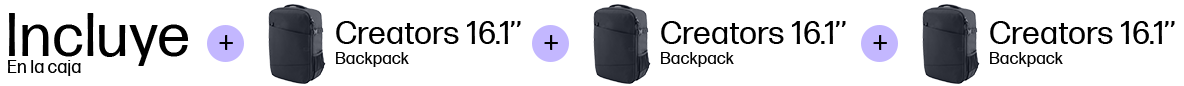
<style>
.page{position:relative;width:1184px;height:86px;background:#ffffff}
.page>*{position:absolute;margin:0}
.t1{font:60px "FormaDJRMicro-Regular";color:#000000}
.t2{font:32px "FormaDJRMicro-Regular";color:#000000}
.t3{font:30px "FormaDJRMicro-Regular";color:#000000}
.t4{font:17px "FormaDJRMicro-Regular";color:#000000}
.t5{font:18px "FormaDJRMicro-Regular";color:#000000}
</style>
<div class="page">
<p class="t1" style="left:9px;top:13px;width:180px;height:53px">Incluye</p>
<p class="t2" style="left:336px;top:21px;width:185px;height:23px">Creators 16.1’’</p>
<p class="t2" style="left:661px;top:21px;width:185px;height:23px">Creators 16.1’’</p>
<p class="t2" style="left:990px;top:21px;width:185px;height:23px">Creators 16.1’’</p>
<p class="t3" style="left:219px;top:35px;width:14px;height:15px">+</p>
<p class="t3" style="left:544px;top:35px;width:14px;height:15px">+</p>
<p class="t3" style="left:873px;top:35px;width:14px;height:15px">+</p>
<p class="t4" style="left:336px;top:52px;width:73px;height:15px">Backpack</p>
<p class="t4" style="left:661px;top:52px;width:73px;height:15px">Backpack</p>
<p class="t4" style="left:990px;top:52px;width:73px;height:15px">Backpack</p>
<p class="t5" style="left:8px;top:60px;width:73px;height:16px">En la caja</p>
</div>
